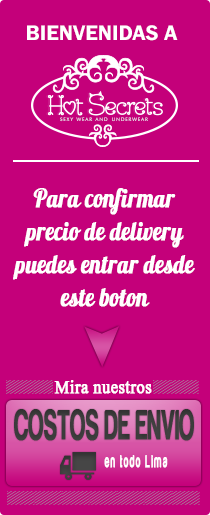
<style>
.page{position:relative;width:210px;height:515px;background:#c4007a}
.page>*{position:absolute;margin:0}
.t1{font:21.6px "FranklinGothic-Demi";color:#ffffff;text-transform:uppercase}
.t2{font:25.4px/33px "Lobster13";color:#ffffff;font-weight:bold;scale:0.87 1}
.t3{font:24.2px "Kokila";color:#ffffff;font-weight:bold;scale:0.87 1}
.t4{font:43px "Harabara";color:#3c3c3c;text-transform:uppercase;font-weight:bold;scale:0.51 1}
.t5{font:18.4px "Harabara";letter-spacing:0.145em;color:#ffffff;font-weight:bold;scale:0.49 1}
</style>
<div class="page">
<p class="t1" style="left:27px;top:25px;width:151px;height:16px">BIENVENIDAS A</p>
<p class="t2" style="left:13px;top:188px;width:182px;height:119px;text-align:center">Para confirmar precio de delivery puedes entrar desde este boton</p>
<p class="t3" style="left:54px;top:380px;width:98px;height:14px">Mira nuestros</p>
<p class="t4" style="left:14px;top:409px;width:180px;height:32px">Costos de Envio</p>
<p class="t5" style="left:104px;top:455px;width:64px;height:13px">en todo Lima</p>
</div>
